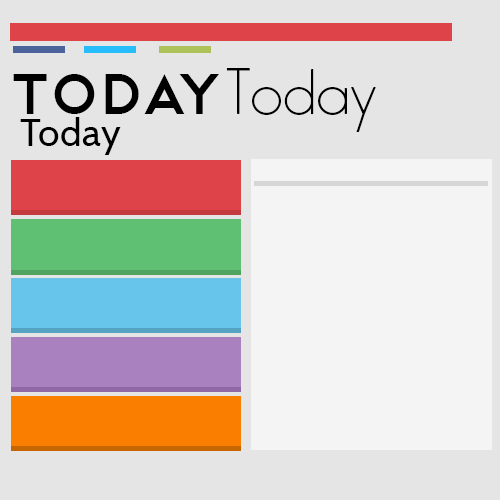
<style>
.page{position:relative;width:500px;height:500px;background:#e5e5e5}
.page>*{position:absolute;margin:0}
.t1{font:74px "Telegrafico";letter-spacing:0.01em;color:#000000}
.t2{font:74px "Minimal";letter-spacing:0.01em;color:#000000}
.t3{font:39px "Cabin-Regular";letter-spacing:0.01em;color:#000000}
</style>
<div class="page">
<p class="t1" style="left:13px;top:74px;width:206px;height:40px">Today</p>
<p class="t2" style="left:226px;top:68px;width:150px;height:64px">Today</p>
<p class="t3" style="left:20px;top:117px;width:101px;height:38px">Today</p>
</div>
